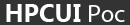
<style>
.page{position:relative;width:130px;height:25px;background:#333333}
.page>*{position:absolute;margin:0}
.t1{font:25px "MicrosoftTaiLe-Bold";color:#ffffff}
.t2{font:25px "MyriadPro-Regular";color:#ffffff}
</style>
<div class="page">
<p class="t1" style="left:6px;top:4px;width:119px;height:18px">HPCUI <span class="t2">Poc</span></p>
</div>
